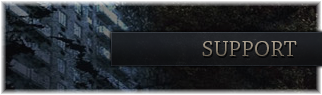
<style>
.page{position:relative;width:322px;height:95px}
.page>*{position:absolute;margin:0}
.t1{font:22px "ChaparralPro-Regular";text-transform:uppercase;scale:1.04 1}
</style>
<div class="page">
<p class="t1" style="left:202px;top:41px;width:95px;height:15px">Support</p>
</div>
